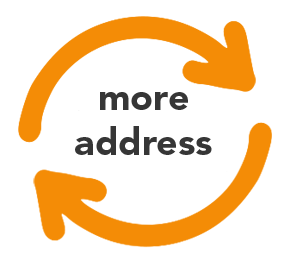
<style>
.page{position:relative;width:289px;height:265px;background:#ffffff}
.page>*{position:absolute;margin:0}
.t1{font:37.5px "AvenirLTStd-Black";color:#363636}
</style>
<div class="page">
<p class="t1" style="left:75px;top:92px;width:137px;height:63px;text-align:center">more<br>address</p>
</div>
